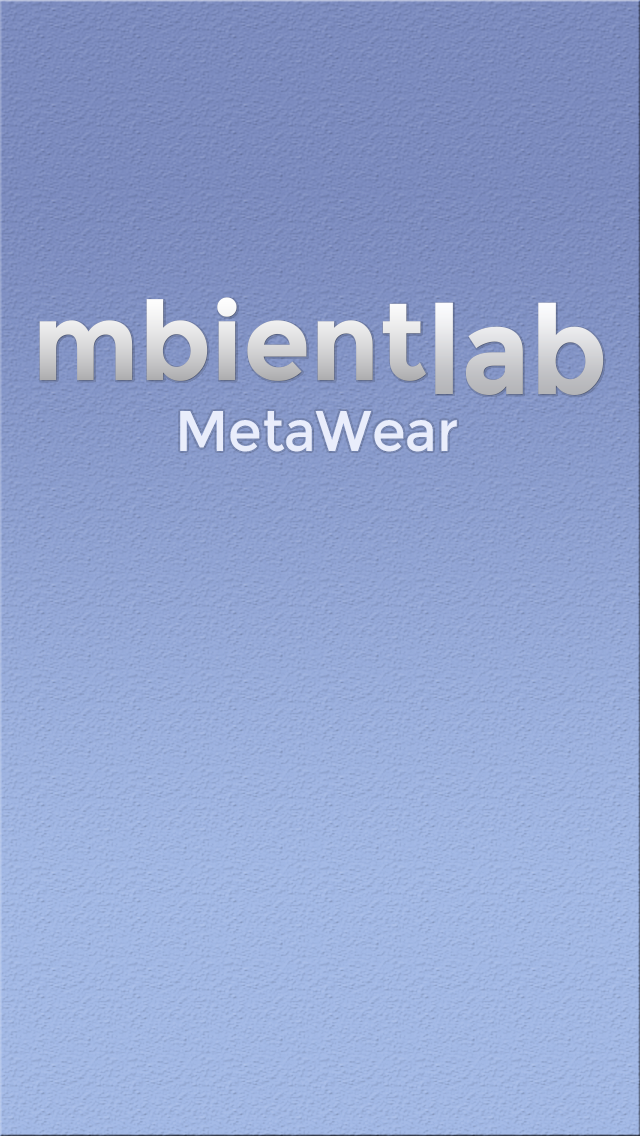
<style>
.page{position:relative;width:640px;height:1136px}
.page>*{position:absolute;margin:0}
.t1{font:108.7px "Montserrat-Bold"}
.t2{font:122.8px "Montserrat-Bold";scale:0.95 1}
.t3{font:57.2px "Montserrat-Regular";color:#e9edfb;scale:0.95 1}
</style>
<div class="page">
<p class="t1" style="left:39px;top:297px;width:387px;height:84px">mbient</p>
<p class="t2" style="left:435px;top:302px;width:169px;height:93px">lab</p>
<p class="t3" style="left:180px;top:411px;width:277px;height:41px">MetaWear</p>
</div>
